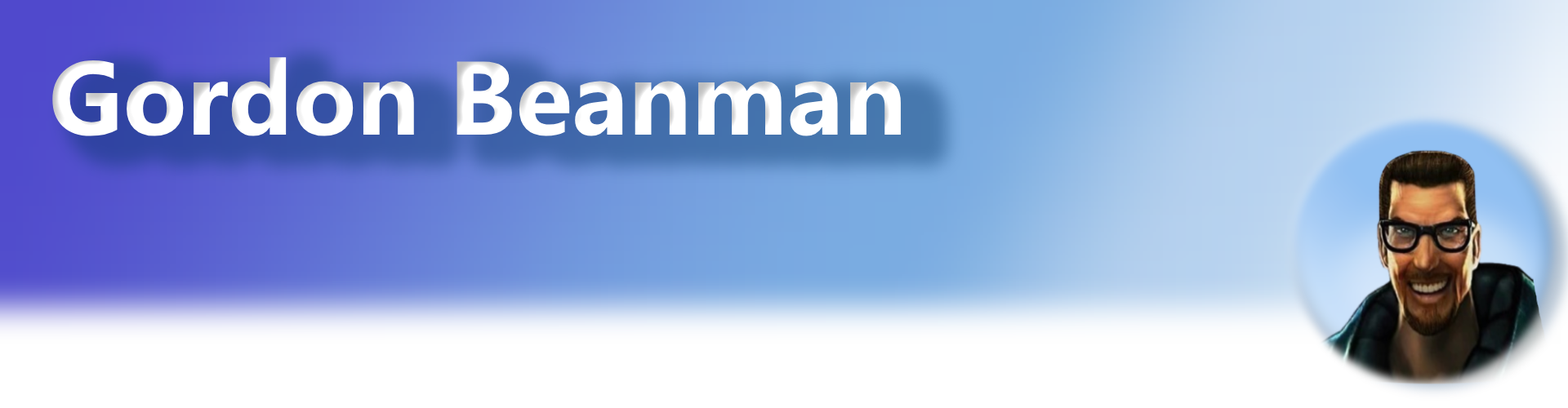
<style>
.page{position:relative;width:1568px;height:408px}
.page>*{position:absolute;margin:0}
.t1{font:104.5px "SegoeUI-Bold";color:#ffffff}
</style>
<div class="page">
<p class="t1" style="left:52px;top:57px;width:849px;height:79px">Gordon Beanman</p>
</div>
